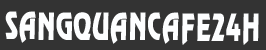
<style>
.page{position:relative;width:266px;height:50px;background:#333333}
.page>*{position:absolute;margin:0}
.t1{font:33.4px "VNI-Revue-Bold";color:#fdfeff;text-transform:uppercase;scale:0.68 1}
</style>
<div class="page">
<p class="t1" style="left:5px;top:11px;width:254px;height:34px">sANGQUANCAFE24H</p>
</div>
